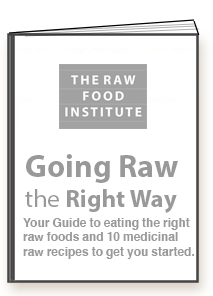
<style>
.page{position:relative;width:213px;height:296px;background:#ffffff}
.page>*{position:absolute;margin:0}
.t1{font:32px "MyriadPro-Bold";color:#999999}
.t2{font:25px "MyriadPro-Regular";color:#999999}
.t3{font:25px "MyriadPro-Bold";color:#999999}
.t4{font:12px "Helvetica-Bold";color:#999999}
</style>
<div class="page">
<p class="t1" style="left:25px;top:154px;width:153px;height:59px">Going Raw <br><span class="t2">the </span><span class="t3">Right Way</span></p>
<p class="t4" style="left:23px;top:218px;width:172px;height:41px">Your Guide to eating the right<br>raw foods and 10 medicinal<br>raw recipes to get you started.</p>
</div>
